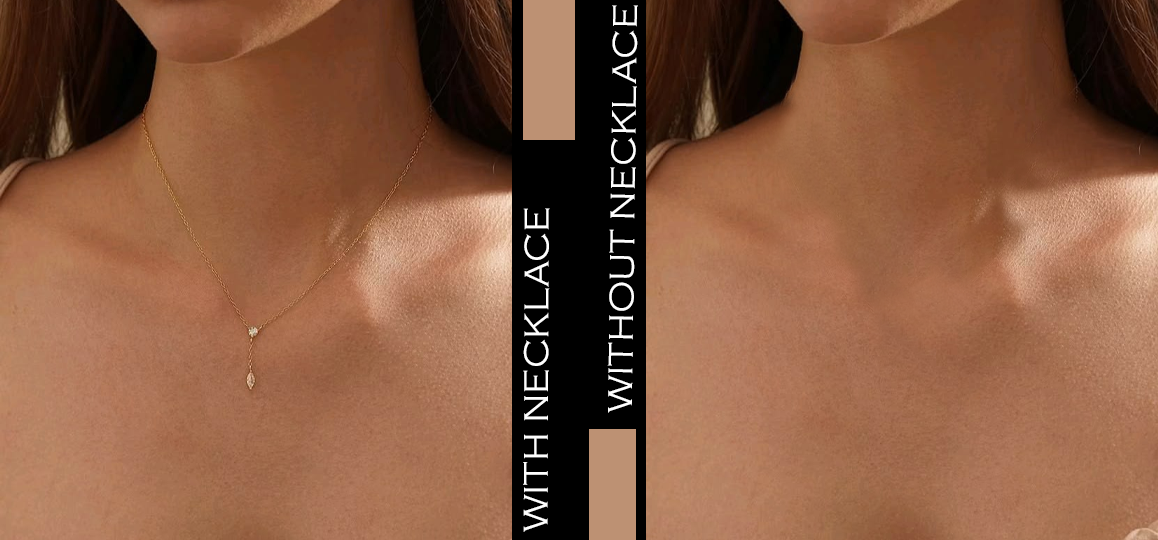
<style>
.page{position:relative;width:1158px;height:540px}
.page>*{position:absolute;margin:0}
.t1{font:35.4px "CopperplateGothic-Light";color:#fefefe}
</style>
<div class="page">
<p class="t1" style="left:607px;top:5px;width:31px;height:408px;rotate:-89deg">WITHOUT NECKLACE</p>
<p class="t1" style="left:523px;top:208px;width:27px;height:324px;rotate:-90deg">WITH NECKLACE</p>
</div>
